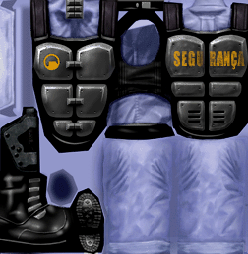
<style>
.page{position:relative;width:248px;height:254px}
.page>*{position:absolute;margin:0}
.t1{font:18.4px "Impact";letter-spacing:0.01em;scale:0.7 1}
.t2{font:18.4px "Impact";letter-spacing:0.07em;scale:0.74 1}
</style>
<div class="page">
<p class="t1" style="left:173px;top:51px;width:72px;height:19px"><span class="t2">SEGU</span>  RANÇA</p>
</div>
